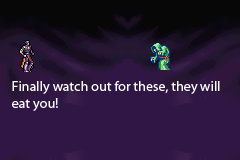
<style>
.page{position:relative;width:240px;height:160px;background:#301644}
.page>*{position:absolute;margin:0}
.t1{font:14px "MyriadPro-Regular";color:#fefcfc}
</style>
<div class="page">
<p class="t1" style="left:12px;top:81px;width:208px;height:30px">Finally watch out for these, they will eat you!</p>
</div>
